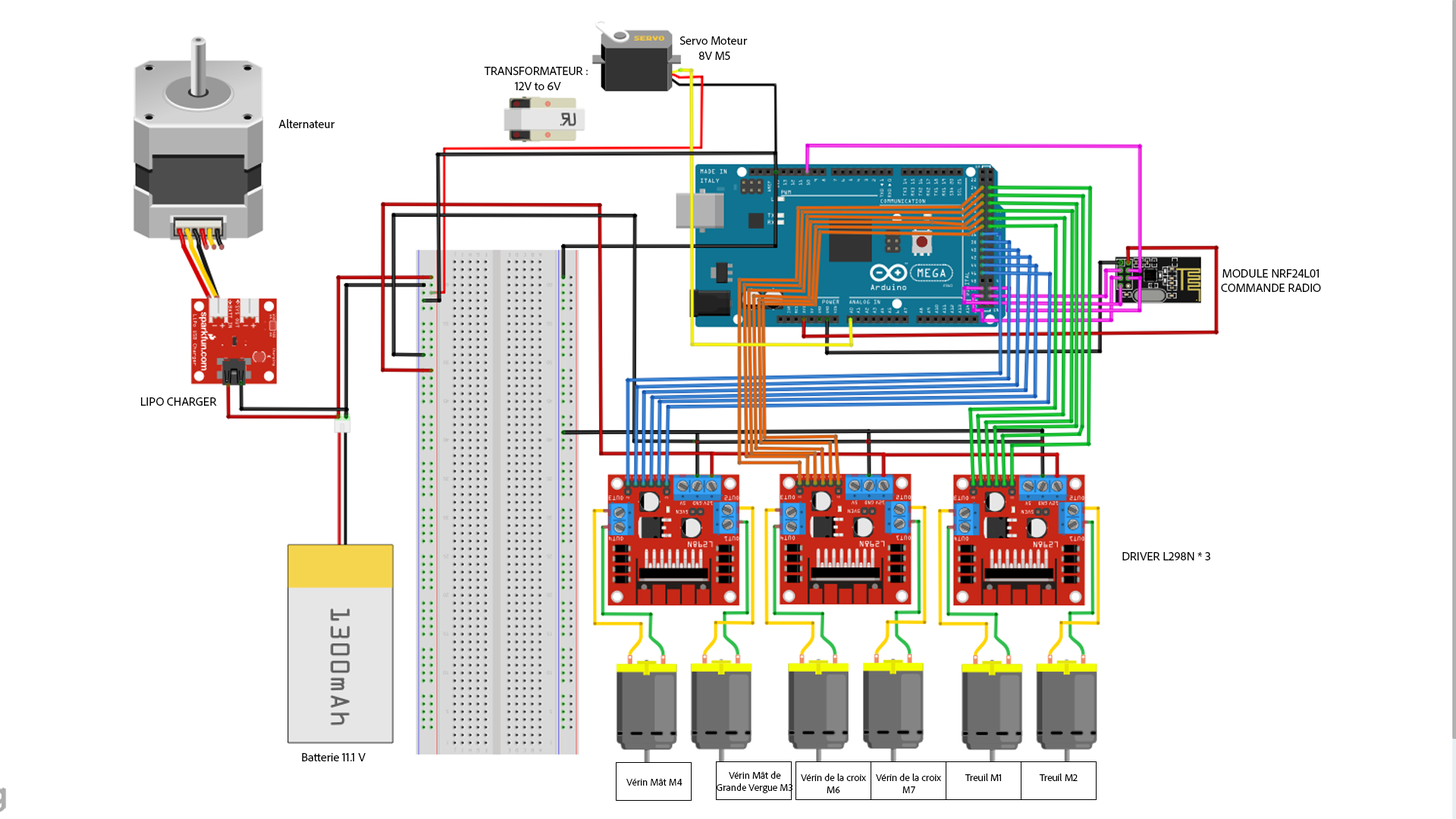
<style>
.page{position:relative;width:1456px;height:819px;background:#ffffff}
.page>*{position:absolute;margin:0}
.t1{font:12.1px "AdobeClean-Regular";color:#000000}
.t2{font:10.1px "AdobeClean-Regular";color:#000000}
</style>
<div class="page">
<p class="t1" style="left:680px;top:36px;width:68px;height:24px;text-align:center">Servo Moteur <br>8V M5</p>
<p class="t1" style="left:484px;top:67px;width:104px;height:23px;text-align:center">TRANSFORMATEUR : <br>12V to 6V</p>
<p class="t1" style="left:278px;top:119px;width:57px;height:9px">Alternateur</p>
<p class="t1" style="left:1221px;top:269px;width:100px;height:23px;text-align:center">MODULE NRF24L01<br>COMMANDE RADIO</p>
<p class="t1" style="left:141px;top:397px;width:76px;height:9px">LIPO CHARGER</p>
<p class="t1" style="left:1122px;top:552px;width:88px;height:8px">DRIVER L298N * 3</p>
<p class="t1" style="left:302px;top:753px;width:64px;height:8px">Batterie 11.1 V</p>
<p class="t2" style="left:717px;top:771px;width:75px;height:22px;text-align:center">Vérin Mât de Grande Vergue M3</p>
<p class="t2" style="left:801px;top:773px;width:65px;height:20px;text-align:center">Vérin de la croix M6</p>
<p class="t2" style="left:876px;top:773px;width:65px;height:20px;text-align:center">Vérin de la croix M7</p>
<p class="t2" style="left:965px;top:773px;width:36px;height:8px">Treuil M1</p>
<p class="t2" style="left:1039px;top:773px;width:39px;height:8px">Treuil M2</p>
<p class="t2" style="left:626px;top:778px;width:56px;height:8px">Vérin Mât M4</p>
</div>
